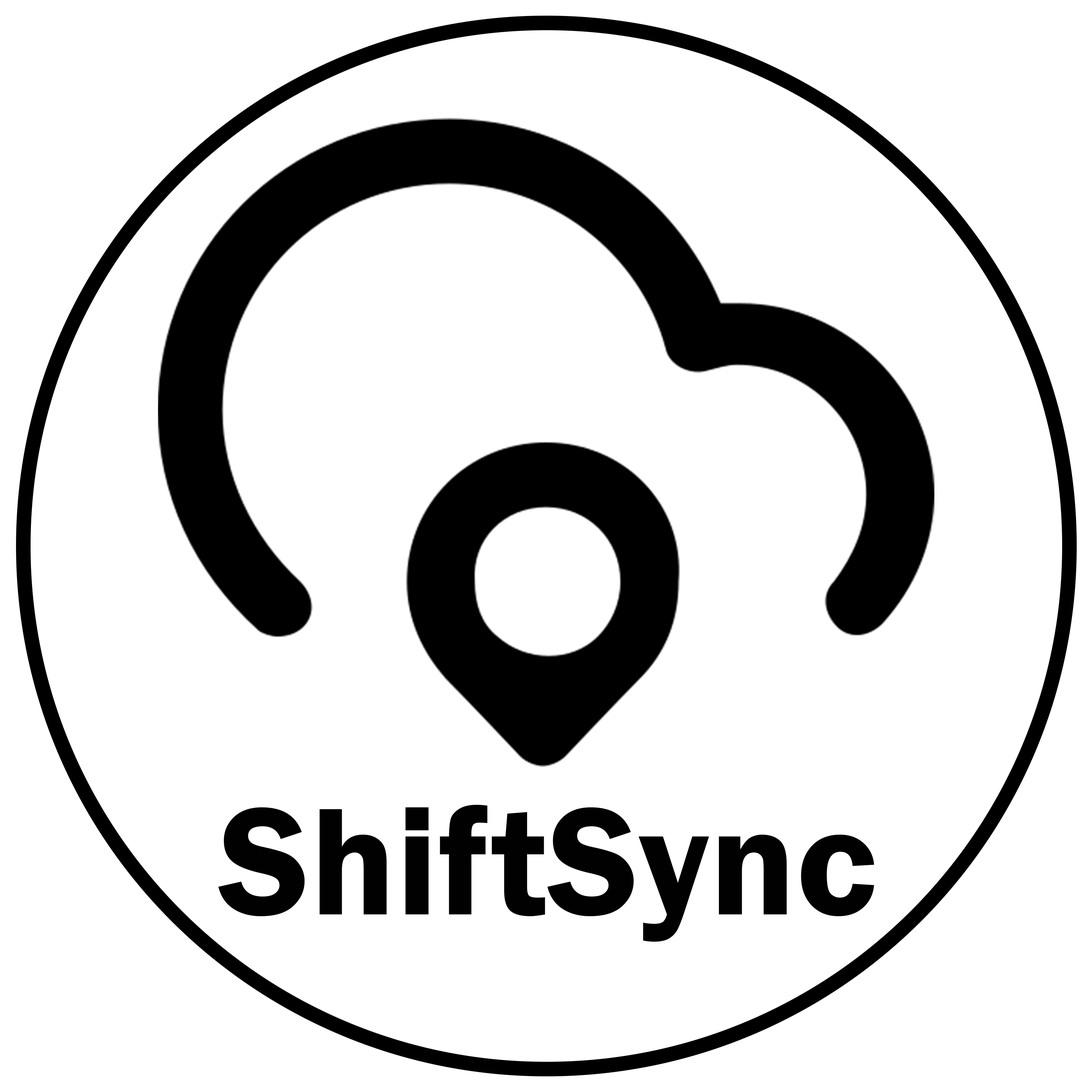
<style>
.page{position:relative;width:1092px;height:1092px;background:#ffffff}
.page>*{position:absolute;margin:0}
.t1{font:158px "FranklinGothic-Demi";color:#010101}
</style>
<div class="page">
<p class="t1" style="left:218px;top:805px;width:656px;height:137px">ShiftSync</p>
</div>
